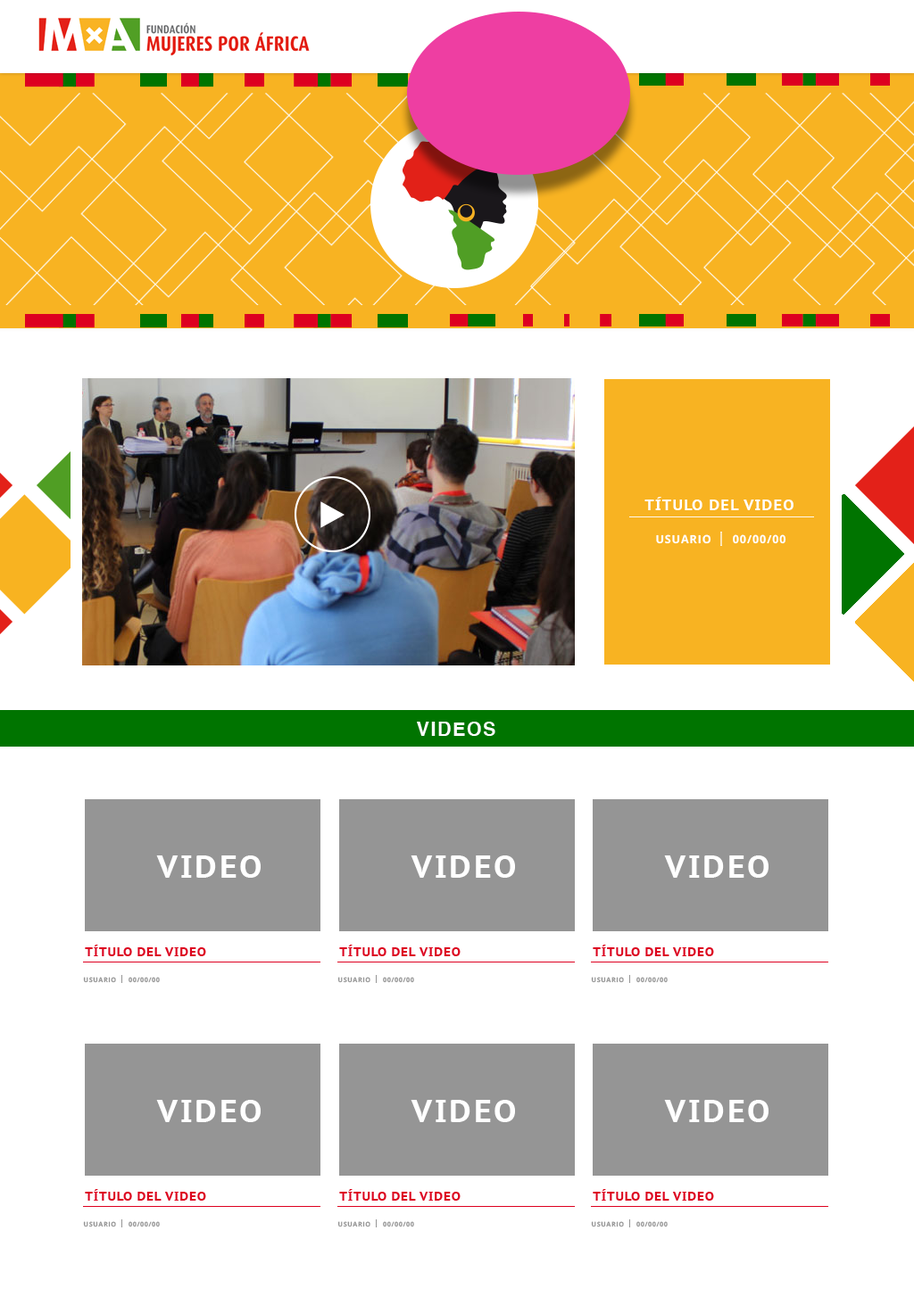
<style>
.page{position:relative;width:914px;height:1305px;background:#ffffff}
.page>*{position:absolute;margin:0}
.t1{font:15.6px "PTSans-CaptionBold";letter-spacing:0.07em;color:#ffffff;text-transform:uppercase}
.t2{font:11.4px "OpenSans-Bold";letter-spacing:0.07em;color:#ffffff;text-transform:uppercase}
.t3{font:19px "Helvetica-Bold";letter-spacing:0.07em;color:#ffffff;text-transform:uppercase}
.t4{font:31.7px "PTSans-CaptionBold";letter-spacing:0.07em;color:#ffffff;text-transform:uppercase}
.t5{font:12.3px "PTSans-CaptionBold";letter-spacing:0.07em;color:#dd0020;text-transform:uppercase}
.t6{font:6.6px "OpenSans-Bold";letter-spacing:0.07em;color:#959595;text-transform:uppercase}
</style>
<div class="page">
<p class="t1" style="left:644px;top:497px;width:149px;height:13px">TÍTULO DEL VIDEO</p>
<p class="t2" style="left:656px;top:534px;width:55px;height:10px">usuario</p>
<p class="t2" style="left:732px;top:534px;width:54px;height:10px">00/00/00</p>
<p class="t3" style="left:417px;top:722px;width:78px;height:14px">VIDEOS</p>
<p class="t4" style="left:156px;top:856px;width:105px;height:22px">VIDEO</p>
<p class="t4" style="left:410px;top:856px;width:105px;height:22px">VIDEO</p>
<p class="t4" style="left:664px;top:856px;width:104px;height:22px">VIDEO</p>
<p class="t5" style="left:85px;top:945px;width:121px;height:11px">TÍTULO DEL VIDEO</p>
<p class="t5" style="left:339px;top:945px;width:121px;height:11px">TÍTULO DEL VIDEO</p>
<p class="t5" style="left:592px;top:945px;width:122px;height:11px">TÍTULO DEL VIDEO</p>
<p class="t6" style="left:83px;top:977px;width:33px;height:6px">usuario</p>
<p class="t6" style="left:128px;top:977px;width:32px;height:6px">00/00/00</p>
<p class="t6" style="left:337px;top:977px;width:33px;height:6px">usuario</p>
<p class="t6" style="left:383px;top:977px;width:31px;height:6px">00/00/00</p>
<p class="t6" style="left:591px;top:977px;width:33px;height:6px">usuario</p>
<p class="t6" style="left:636px;top:977px;width:31px;height:6px">00/00/00</p>
<p class="t4" style="left:156px;top:1100px;width:105px;height:22px">VIDEO</p>
<p class="t4" style="left:410px;top:1100px;width:105px;height:22px">VIDEO</p>
<p class="t4" style="left:664px;top:1100px;width:104px;height:22px">VIDEO</p>
<p class="t5" style="left:85px;top:1189px;width:121px;height:12px">TÍTULO DEL VIDEO</p>
<p class="t5" style="left:339px;top:1189px;width:121px;height:12px">TÍTULO DEL VIDEO</p>
<p class="t5" style="left:592px;top:1189px;width:122px;height:12px">TÍTULO DEL VIDEO</p>
<p class="t6" style="left:83px;top:1221px;width:33px;height:7px">usuario</p>
<p class="t6" style="left:128px;top:1221px;width:32px;height:7px">00/00/00</p>
<p class="t6" style="left:337px;top:1221px;width:33px;height:7px">usuario</p>
<p class="t6" style="left:383px;top:1221px;width:31px;height:7px">00/00/00</p>
<p class="t6" style="left:591px;top:1221px;width:33px;height:7px">usuario</p>
<p class="t6" style="left:636px;top:1221px;width:31px;height:7px">00/00/00</p>
</div>
